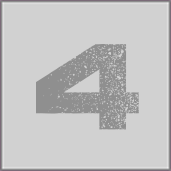
<style>
.page{position:relative;width:171px;height:171px;background:#d1d1d1}
.page>*{position:absolute;margin:0}
.t1{font:121px "Coalition";color:#8f8f8f}
</style>
<div class="page">
<p class="t1" style="left:36px;top:44px;width:103px;height:86px">4</p>
<p class="t1" style="left:36px;top:44px;width:103px;height:86px">4</p>
<p class="t1" style="left:36px;top:44px;width:103px;height:86px">4</p>
</div>
